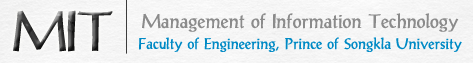
<style>
.page{position:relative;width:473px;height:63px}
.page>*{position:absolute;margin:0}
.t1{font:83.3px "DSNDeCho"}
.t2{font:29.2px "DSNDeCho";color:#8b8b8b}
.t3{font:22.9px "DSNDeCho";color:#008ac5}
</style>
<div class="page">
<p class="t1" style="left:13px;top:10px;width:100px;height:42px">MIT</p>
<p class="t2" style="left:142px;top:13px;width:317px;height:19px">Management of Information Technology</p>
<p class="t3" style="left:139px;top:37px;width:323px;height:15px">Faculty of Engineering, Prince of Songkla University</p>
</div>
